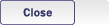
<style>
.page{position:relative;width:110px;height:25px}
.page>*{position:absolute;margin:0}
.t1{font:12px "FranklinGothic-Medium";letter-spacing:0.025em;color:#333366}
</style>
<div class="page">
<p class="t1" style="left:23px;top:8px;width:29px;height:9px">Close</p>
</div>
